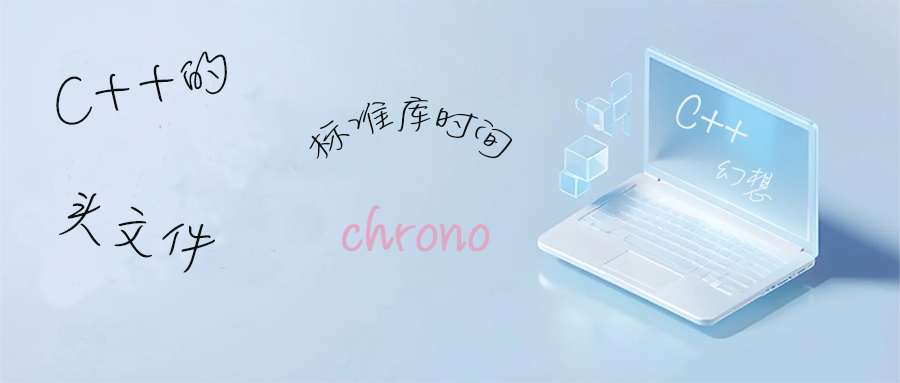
<style>
.page{position:relative;width:900px;height:383px}
.page>*{position:absolute;margin:0}
.t1{font:70.8px "MLingWaiMedium-SC";color:#0d0e0e}
.t2{font:41.7px "MLingWaiMedium-SC";color:#0d0e0e}
.t3{font:39.7px "Noteworthy-Light";color:#e5f3f3}
.t4{font:41.7px "MLingWaiMedium-SC";color:#e5f3f3}
.t5{font:73.3px "MLingWaiMedium-SC";color:#0d0e0e}
.t6{font:66.7px "MLingWaiMedium-SC";color:#dfa8c4;font-weight:bold}
</style>
<div class="page">
<p class="t1" style="left:56px;top:51px;width:171px;height:74px;rotate:-12deg">C++的</p>
<p class="t2" style="left:309px;top:96px;width:204px;height:63px">标准库时间</p>
<p class="t3" style="left:676px;top:94px;width:72px;height:49px;rotate:23deg">C++</p>
<p class="t4" style="left:716px;top:160px;width:57px;height:42px;rotate:23deg">幻想</p>
<p class="t5" style="left:59px;top:192px;width:156px;height:81px;rotate:16deg">头文件</p>
<p class="t6" style="left:342px;top:205px;width:148px;height:47px">chrono</p>
</div>
